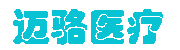
<style>
.page{position:relative;width:180px;height:50px;background:#ffffff}
.page>*{position:absolute;margin:0}
.t1{font:38px "STHupo";color:#07c3d4}
</style>
<div class="page">
<p class="t1" style="left:13px;top:9px;width:150px;height:36px">迈骆医疗</p>
</div>
